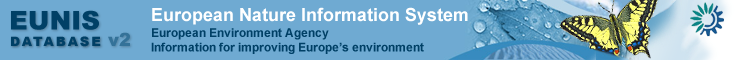
<style>
.page{position:relative;width:740px;height:60px;background:#6faad2}
.page>*{position:absolute;margin:0}
.t1{font:26px "Arial-Black";color:#004066}
.t2{font:18px "Arial-BoldMT";color:#ffffff}
.t3{font:12px "Arial-BoldMT";color:#004066}
.t4{font:13px "Arial-Black";letter-spacing:0.16em;color:#004066}
.t5{font:18px "Arial-Black";color:#347299}
</style>
<div class="page">
<p class="t1" style="left:11px;top:10px;width:88px;height:20px">EUNIS</p>
<p class="t2" style="left:152px;top:7px;width:316px;height:18px">European Nature Information System</p>
<p class="t3" style="left:151px;top:28px;width:273px;height:26px">European Environment Agency<br>Information for improving Europe’s environment</p>
<p class="t4" style="left:11px;top:36px;width:90px;height:11px">DATABASE</p>
<p class="t5" style="left:108px;top:32px;width:22px;height:14px">v2</p>
</div>
